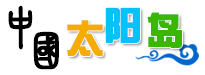
<style>
.page{position:relative;width:205px;height:75px;background:#ffffff}
.page>*{position:absolute;margin:0}
.t1{font:45px "HYj3gf";color:#000000;font-weight:bold}
.t2{font:36px "SingyiEG-Ultra-GB";color:#07c2f8;font-weight:bold}
.t3{font:36px "SingyiEG-Ultra-GB";color:#39b701;font-weight:bold}
.t4{font:36px "SingyiEG-Ultra-GB";color:#f4ac00;font-weight:bold}
</style>
<div class="page">
<p class="t1" style="left:8px;top:5px;width:25px;height:45px">中</p>
<p class="t2" style="left:105px;top:7px;width:35px;height:36px">阳</p>
<p class="t3" style="left:147px;top:12px;width:35px;height:36px">岛</p>
<p class="t4" style="left:67px;top:20px;width:36px;height:36px">太</p>
<p class="t1" style="left:33px;top:31px;width:26px;height:39px">国</p>
</div>
